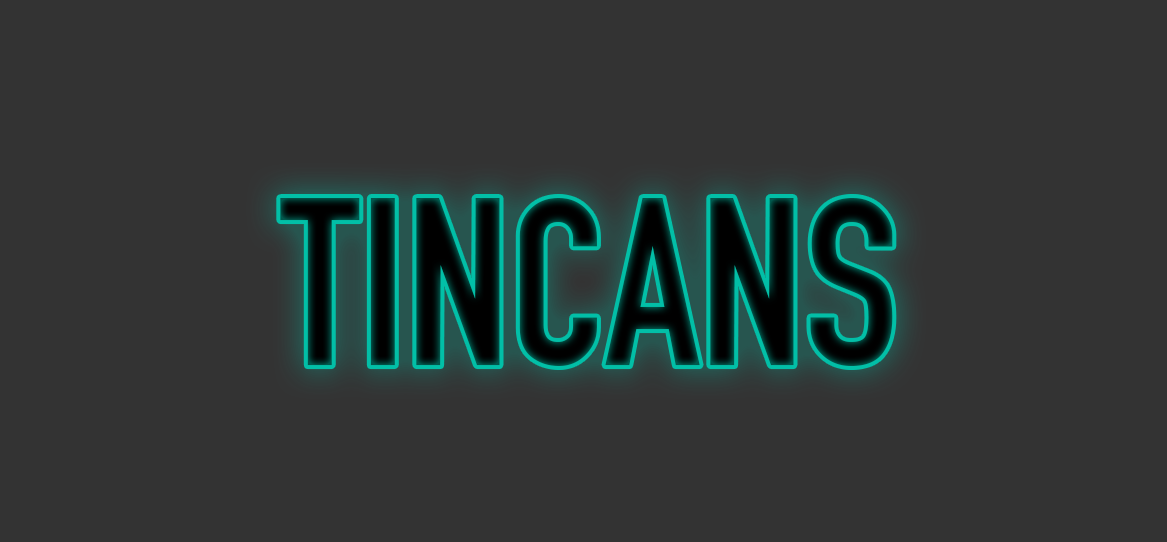
<style>
.page{position:relative;width:1167px;height:542px;background:#333333}
.page>*{position:absolute;margin:0}
.t1{font:233.7px "DINEngschrift";color:#000c0a;text-transform:uppercase}
</style>
<div class="page">
<p class="t1" style="left:280px;top:198px;width:613px;height:168px">tincans</p>
</div>
